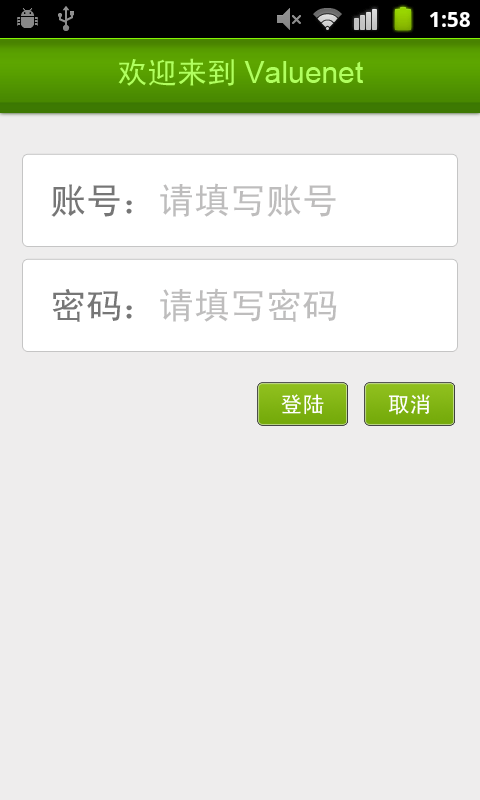
<style>
.page{position:relative;width:480px;height:800px;background:#eeeded}
.page>*{position:absolute;margin:0}
.t1{font:30px "ArialMT";color:#b0ff5f}
.t2{font:30px "SimHei";color:#b0ff5f}
.t3{font:36px "SimHei";color:#bebdbd}
.t4{font:36px "SimHei";color:#767676}
.t5{font:22px "SimHei";color:#ffffff}
</style>
<div class="page">
<p class="t1" style="left:118px;top:58px;width:245px;height:28px"><span class="t2">欢迎来到</span>Valuenet</p>
<p class="t3" style="left:51px;top:183px;width:285px;height:34px"><span class="t4">账号：</span>请填写账号</p>
<p class="t3" style="left:52px;top:288px;width:285px;height:34px"><span class="t4">密码：</span>请填写密码</p>
<p class="t5" style="left:388px;top:394px;width:42px;height:21px">取消</p>
</div>
